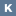
<style>
.page{position:relative;width:16px;height:16px;background:#5d7894}
.page>*{position:absolute;margin:0}
.t1{font:11px "Montserrat-Bold";color:#ffffff}
</style>
<div class="page">
<p class="t1" style="left:4px;top:4px;width:9px;height:8px">K</p>
</div>
